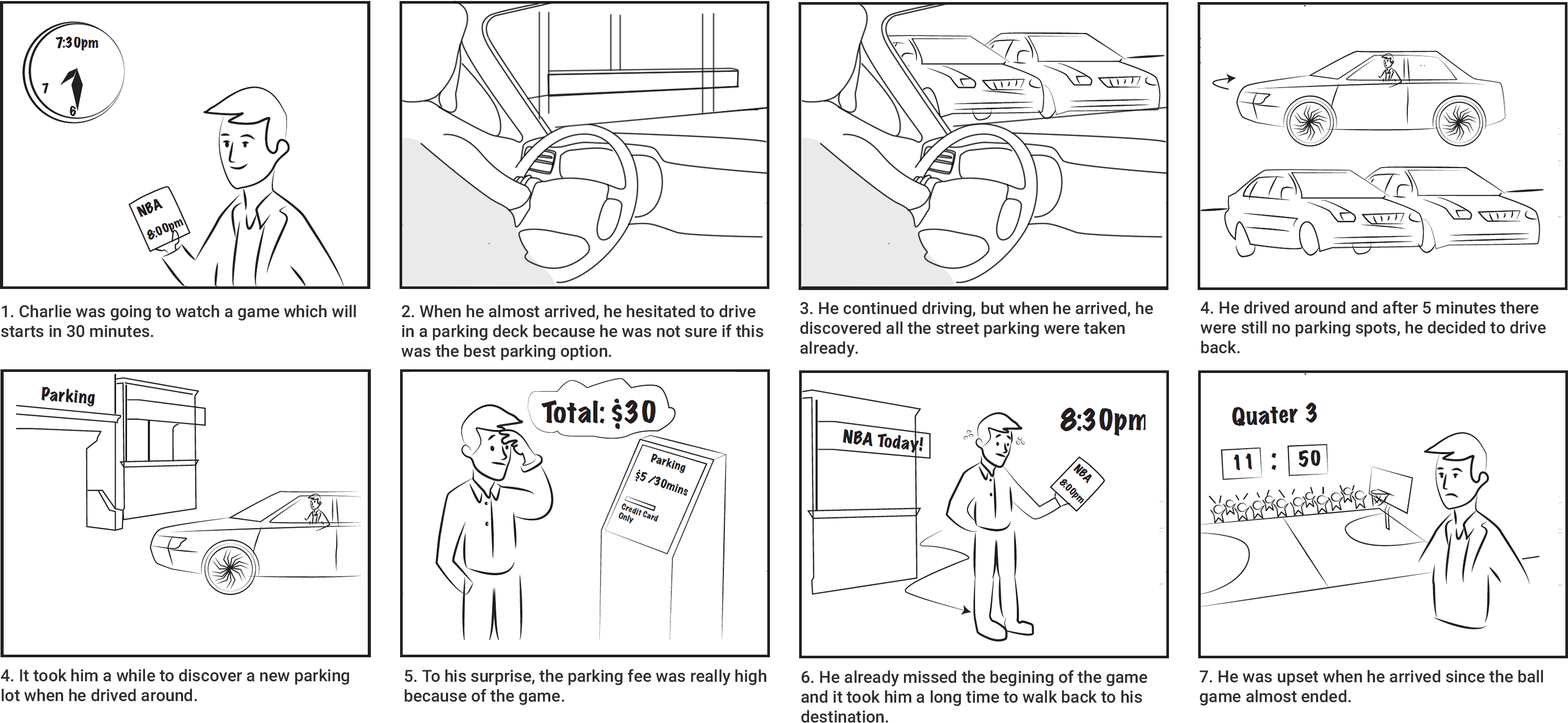
<style>
.page{position:relative;width:1568px;height:723px;background:#ffffff}
.page>*{position:absolute;margin:0}
.t1{font:16.7px "Heebo-Medium";color:#2e2e2e}
</style>
<div class="page">
<p class="t1" style="left:1px;top:305px;width:355px;height:32px">1. Charlie was going to watch a game which will starts in 30 minutes.</p>
<p class="t1" style="left:401px;top:305px;width:363px;height:55px">2. When he almost arrived, he hesitated to drive in a parking deck because he was not sure if this was the best parking option.</p>
<p class="t1" style="left:800px;top:301px;width:353px;height:56px">3. He continued driving, but when he arrived, he discovered all the street parking were taken already.</p>
<p class="t1" style="left:1200px;top:300px;width:346px;height:54px">4. He drived around and after 5 minutes there were still no parking spots, he decided to drive back.</p>
<p class="t1" style="left:1px;top:669px;width:348px;height:33px">4. It took him a while to discover a new parking lot when he drived around.</p>
<p class="t1" style="left:405px;top:669px;width:361px;height:36px">5. To his surprise, the parking fee was really high because of the game.</p>
<p class="t1" style="left:801px;top:670px;width:347px;height:53px">6. He already missed the begining of the game and it took him a long time to walk back to his destination.</p>
<p class="t1" style="left:1200px;top:670px;width:343px;height:36px">7. He was upset when he arrived since the ball game almost ended.</p>
</div>
